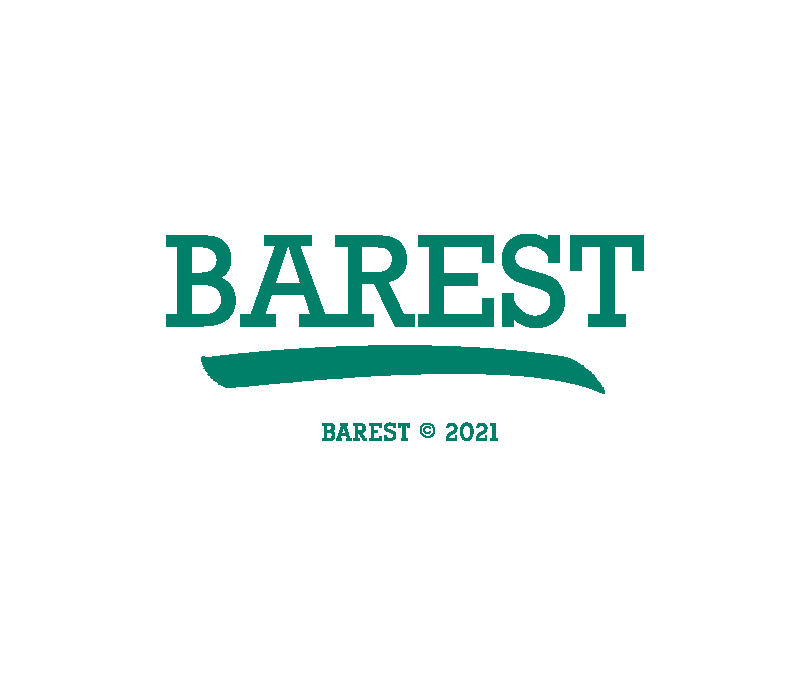
<style>
.page{position:relative;width:800px;height:700px;background:#ffffff}
.page>*{position:absolute;margin:0}
.t1{font:24px "AlexandriaFLF-Bold";color:#017e68;font-weight:bold}
.t2{font:26.7px "AlexandriaFLF-Bold";color:#017e68;font-weight:bold}
</style>
<div class="page">
<p class="t1" style="left:322px;top:422px;width:176px;height:19px">BAREST <span class="t2">©</span> 2021</p>
</div>
